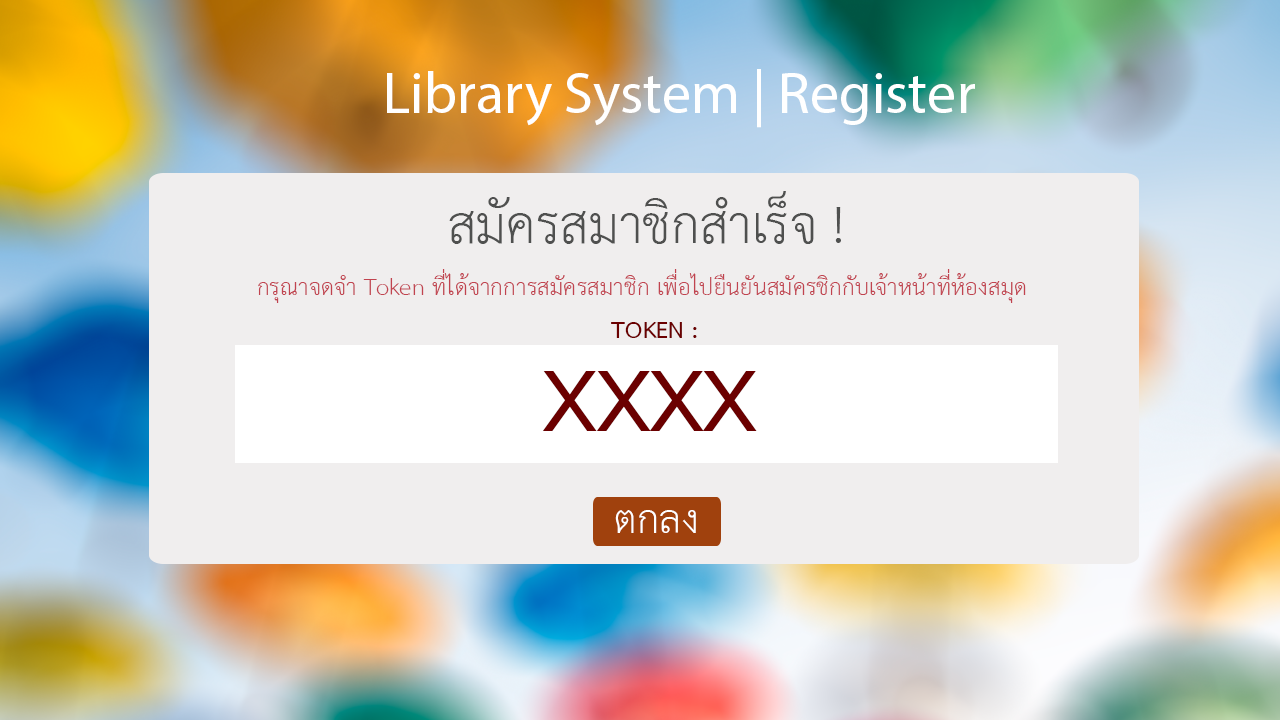
<style>
.page{position:relative;width:1280px;height:720px;background:#f0eeee}
.page>*{position:absolute;margin:0}
.t1{font:58.3px "MyriadPro-Regular";color:#ffffff}
.t2{font:75px "THSarabunPSK";color:#4f504f}
.t3{font:33.3px "THSarabunPSK";color:#c1434f}
.t4{font:33.3px "THSarabunPSK-Bold";color:#6b0000}
.t5{font:125px "THSarabunPSK-Bold";color:#6b0000}
.t6{font:58.3px "THSarabunPSK";color:#ffffff}
</style>
<div class="page">
<p class="t1" style="left:387px;top:69px;width:588px;height:59px">Library System | Register</p>
<p class="t2" style="left:449px;top:191px;width:392px;height:53px">สมัครสมาชิกสำเร็จ !</p>
<p class="t3" style="left:258px;top:269px;width:768px;height:34px">กรุณาจดจำ Token ที่ได้จากการสมัครสมาชิก เพื่อไปยืนยันสมัครชิกกับเจ้าหน้าที่ห้องสมุด</p>
<p class="t4" style="left:611px;top:322px;width:86px;height:16px">TOKEN :</p>
<p class="t5" style="left:542px;top:371px;width:215px;height:60px">XXXX</p>
<p class="t6" style="left:615px;top:510px;width:81px;height:23px">ตกลง</p>
</div>
